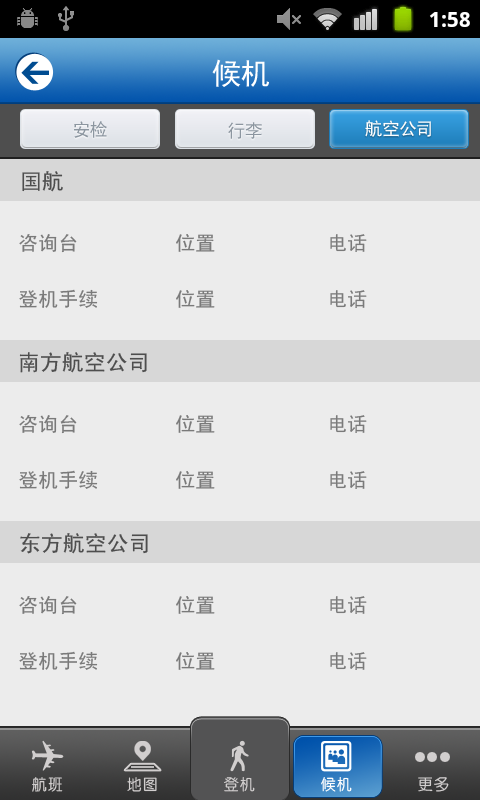
<style>
.page{position:relative;width:480px;height:800px;background:#ececec}
.page>*{position:absolute;margin:0}
.t1{font:30px "SimHei";color:#ffffff;text-transform:uppercase}
.t2{font:18px "SimHei";color:#8c96a0;text-transform:uppercase}
.t3{font:18px "SimHei";color:#ffffff;text-transform:uppercase}
.t4{font:22px "SimHei";color:#4e4e4e}
.t5{font:20px "SimHei";color:#7a7a7a}
.t6{font:16px "CTZhongYuanSJ";color:#d1cece}
.t7{font:16px "CTZhongYuanSJ";color:#fefefe}
</style>
<div class="page">
<p class="t1" style="left:212px;top:59px;width:57px;height:28px">候机</p>
<p class="t2" style="left:74px;top:121px;width:33px;height:17px">安检</p>
<p class="t2" style="left:228px;top:122px;width:34px;height:17px">行李</p>
<p class="t3" style="left:365px;top:120px;width:66px;height:17px">航空公司</p>
<p class="t4" style="left:22px;top:171px;width:41px;height:21px">国航</p>
<p class="t5" style="left:19px;top:234px;width:58px;height:19px">咨询台</p>
<p class="t5" style="left:176px;top:234px;width:39px;height:18px">位置</p>
<p class="t5" style="left:330px;top:234px;width:37px;height:18px">电话</p>
<p class="t5" style="left:19px;top:289px;width:79px;height:19px">登机手续</p>
<p class="t5" style="left:176px;top:290px;width:39px;height:18px">位置</p>
<p class="t5" style="left:330px;top:290px;width:37px;height:18px">电话</p>
<p class="t4" style="left:19px;top:352px;width:128px;height:21px">南方航空公司</p>
<p class="t5" style="left:19px;top:415px;width:58px;height:19px">咨询台</p>
<p class="t5" style="left:176px;top:415px;width:39px;height:18px">位置</p>
<p class="t5" style="left:330px;top:415px;width:37px;height:18px">电话</p>
<p class="t5" style="left:19px;top:470px;width:79px;height:19px">登机手续</p>
<p class="t5" style="left:176px;top:471px;width:39px;height:18px">位置</p>
<p class="t5" style="left:330px;top:471px;width:37px;height:18px">电话</p>
<p class="t4" style="left:20px;top:533px;width:128px;height:21px">东方航空公司</p>
<p class="t5" style="left:19px;top:596px;width:58px;height:19px">咨询台</p>
<p class="t5" style="left:176px;top:596px;width:39px;height:18px">位置</p>
<p class="t5" style="left:330px;top:596px;width:37px;height:18px">电话</p>
<p class="t5" style="left:19px;top:651px;width:79px;height:19px">登机手续</p>
<p class="t5" style="left:176px;top:652px;width:39px;height:18px">位置</p>
<p class="t5" style="left:330px;top:652px;width:37px;height:18px">电话</p>
<p class="t6" style="left:32px;top:777px;width:31px;height:15px">航班</p>
<p class="t6" style="left:127px;top:777px;width:30px;height:15px">地图</p>
<p class="t6" style="left:224px;top:777px;width:31px;height:15px">登机</p>
<p class="t7" style="left:321px;top:777px;width:31px;height:15px">候机</p>
<p class="t6" style="left:418px;top:777px;width:31px;height:15px">更多</p>
</div>
